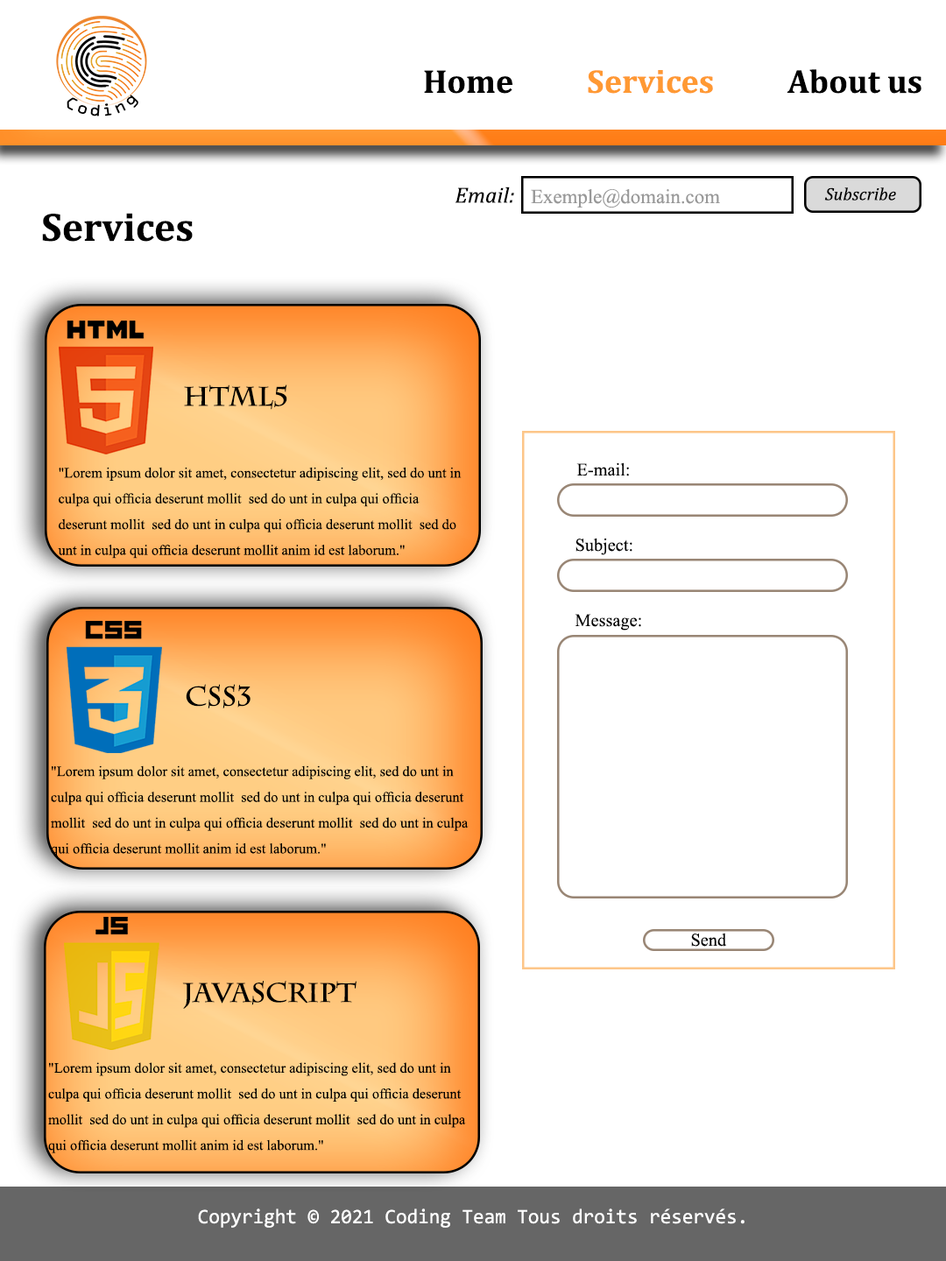
<style>
.page{position:relative;width:946px;height:1261px;background:#ffffff}
.page>*{position:absolute;margin:0}
.t1{font:33.4px "Cambria-Bold";color:#ff9933}
.t2{font:33.4px "Cambria-Bold";color:#000000}
.t3{font:22.2px "Cambria-Italic";color:#000000}
.t4{font:20px "TimesNewRomanPSMT";color:#999999}
.t5{font:17.8px "Cambria-Italic";color:#000000}
.t6{font:40px "Cambria-Bold";color:#000000}
.t7{font:26.8px "CharlemagneStd-Bold";color:#000000}
.t8{font:14.3px/25.8px "TimesNewRomanPSMT";color:#000000}
.t9{font:17.8px "TimesNewRomanPSMT";color:#000000}
.t10{font:20.7px "Consolas";color:#ffffff;scale:0.97 1}
</style>
<div class="page">
<p class="t1" style="left:424px;top:69px;width:497px;height:25px"><span class="t2">Home          </span>Services<span class="t2">          About us</span></p>
<p class="t3" style="left:454px;top:187px;width:60px;height:16px">Email:</p>
<p class="t4" style="left:531px;top:189px;width:189px;height:19px">Exemple@domain.com</p>
<p class="t5" style="left:824px;top:187px;width:72px;height:14px">Subscribe</p>
<p class="t6" style="left:42px;top:213px;width:151px;height:29px">Services</p>
<p class="t7" style="left:184px;top:384px;width:103px;height:26px">HTML5</p>
<p class="t8" style="left:58px;top:467px;width:403px;height:92px">"Lorem ipsum dolor sit amet, consectetur adipiscing elit, sed do unt in culpa qui officia deserunt mollit  sed do unt in culpa qui officia deserunt mollit  sed do unt in culpa qui officia deserunt mollit  sed do unt in culpa qui officia deserunt mollit anim id est laborum."</p>
<p class="t9" style="left:576px;top:462px;width:53px;height:14px">E-mail:</p>
<p class="t9" style="left:575px;top:538px;width:57px;height:17px">Subject:</p>
<p class="t9" style="left:574px;top:614px;width:67px;height:16px">Message:</p>
<p class="t7" style="left:186px;top:684px;width:64px;height:24px">CSS3</p>
<p class="t8" style="left:51px;top:765px;width:417px;height:91px">"Lorem ipsum dolor sit amet, consectetur adipiscing elit, sed do unt in culpa qui officia deserunt mollit  sed do unt in culpa qui officia deserunt mollit  sed do unt in culpa qui officia deserunt mollit  sed do unt in culpa qui officia deserunt mollit anim id est laborum."</p>
<p class="t9" style="left:691px;top:933px;width:36px;height:14px">Send</p>
<p class="t7" style="left:182px;top:981px;width:174px;height:28px">JavaScript</p>
<p class="t8" style="left:48px;top:1062px;width:418px;height:91px">"Lorem ipsum dolor sit amet, consectetur adipiscing elit, sed do unt in culpa qui officia deserunt mollit  sed do unt in culpa qui officia deserunt mollit  sed do unt in culpa qui officia deserunt mollit  sed do unt in culpa qui officia deserunt mollit anim id est laborum."</p>
<p class="t10" style="left:198px;top:1208px;width:546px;height:20px">Copyright © 2021 Coding Team Tous droits réservés.</p>
</div>
